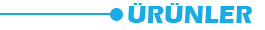
<style>
.page{position:relative;width:265px;height:30px;background:#ffffff}
.page>*{position:absolute;margin:0}
.t1{font:25px "ErasITC-Bold";color:#19ace4}
</style>
<div class="page">
<p class="t1" style="left:128px;top:3px;width:124px;height:20px">ÜRÜNLER</p>
</div>
